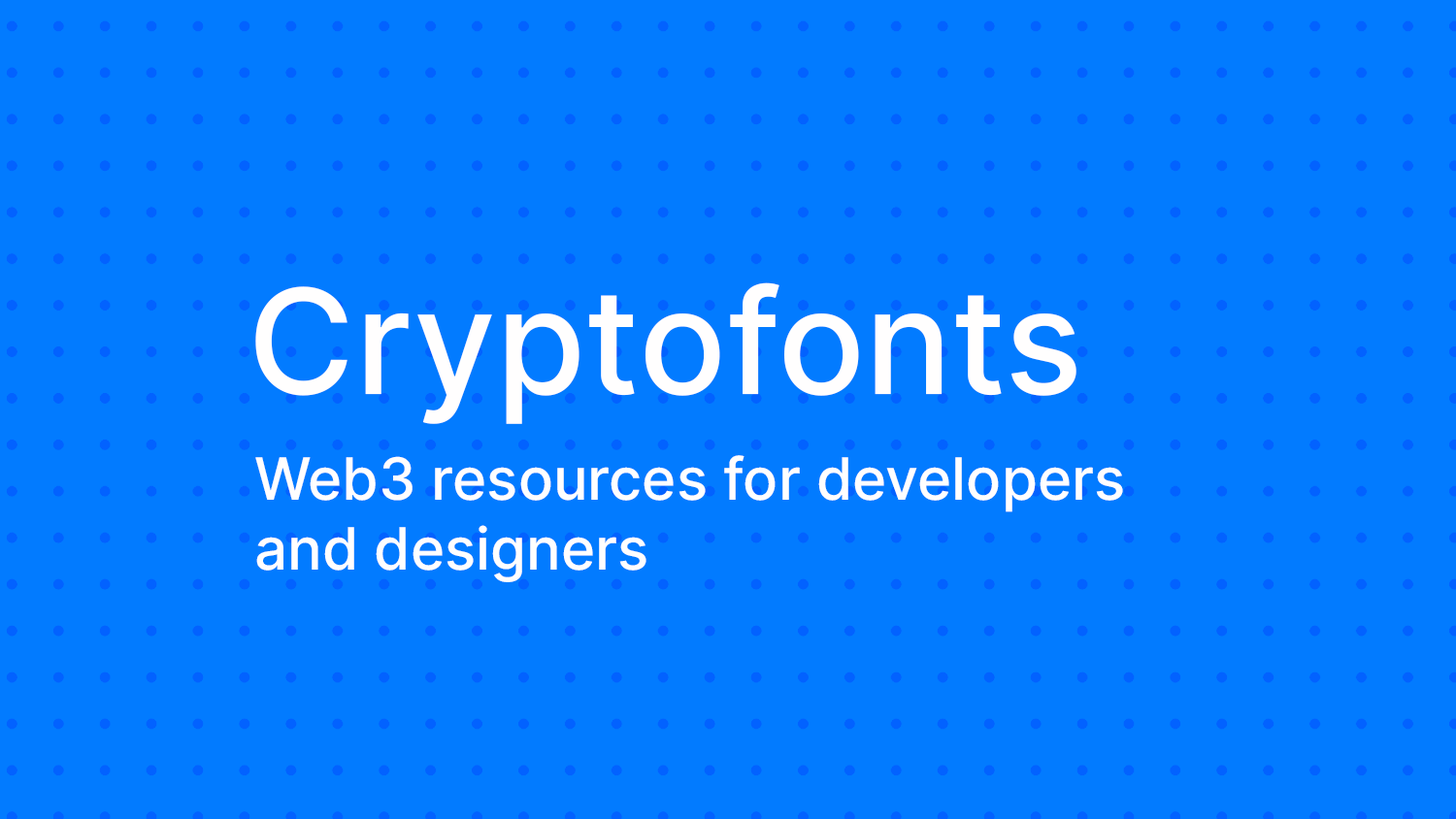
<style>
.page{position:relative;width:1456px;height:819px;background:#027bff}
.page>*{position:absolute;margin:0}
.t1{font:145.6px "Inter-Medium";color:#fffefe}
.t2{font:58.2px "Inter-Medium";color:#fffefe}
</style>
<div class="page">
<p class="t1" style="left:255px;top:282px;width:821px;height:142px">Cryptofonts</p>
<p class="t2" style="left:255px;top:455px;width:868px;height:127px">Web3 resources for developers <br>and designers</p>
</div>
